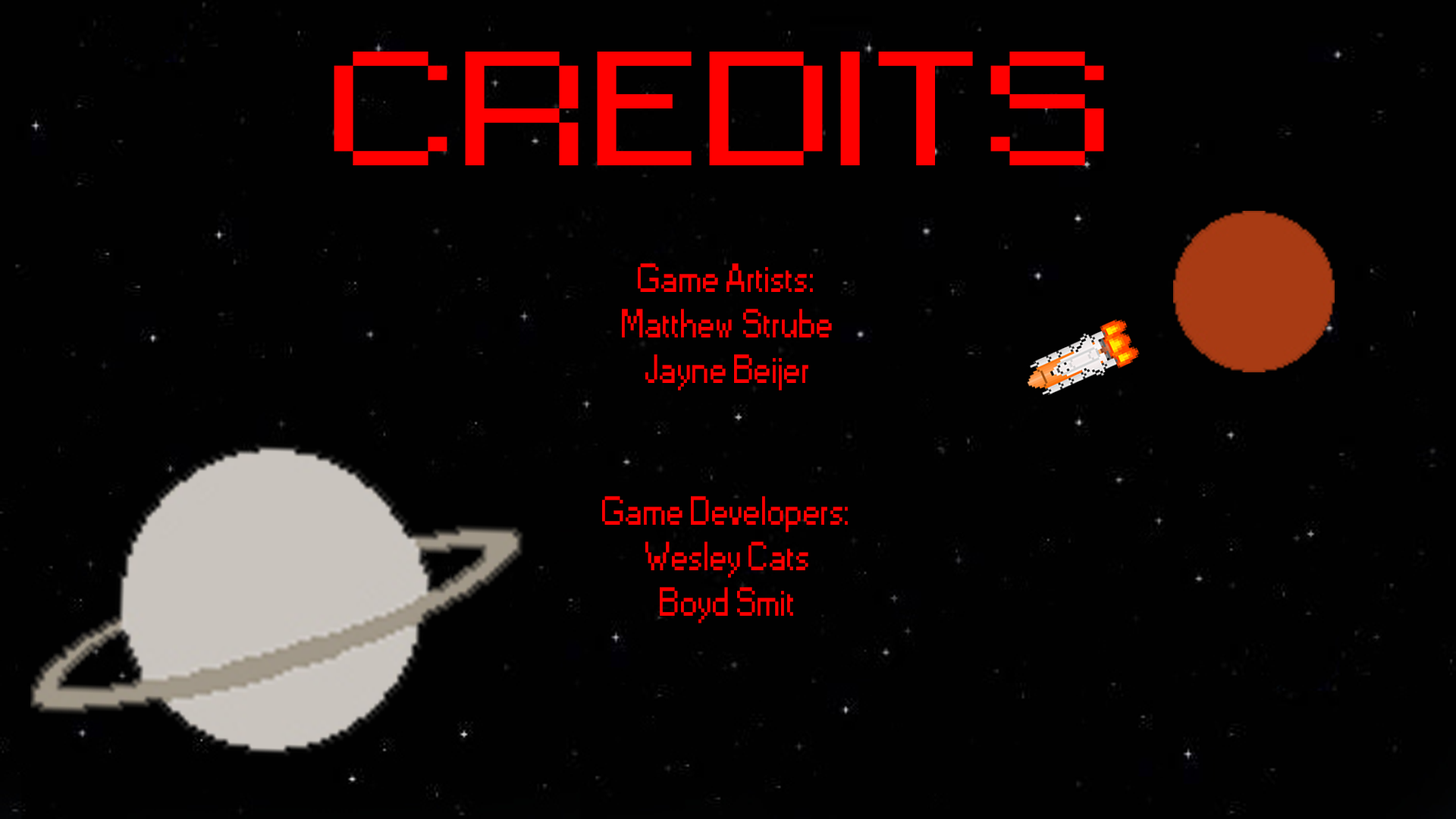
<style>
.page{position:relative;width:1456px;height:819px;background:#010101}
.page>*{position:absolute;margin:0}
.t1{font:151.6px "Small Fonts";color:#ff0000;scale:1.58 1}
.t2{font:37.9px "Small Fonts";color:#ff0000}
</style>
<div class="page">
<p class="t1" style="left:334px;top:52px;width:770px;height:113px">CREDITS</p>
<p class="t2" style="left:622px;top:263px;width:210px;height:128px;text-align:center">Game Artists:<br>Matthew Strube<br>Jayne Beijer</p>
<p class="t2" style="left:602px;top:496px;width:246px;height:127px;text-align:center">Game Developers:<br>Wesley Cats<br>Boyd Smit</p>
</div>
